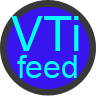
<style>
.page{position:relative;width:96px;height:96px;background:#3815ee}
.page>*{position:absolute;margin:0}
.t1{font:48px "ArialMT";color:#00ffff}
.t2{font:32px "ArialMT";color:#00ffff}
</style>
<div class="page">
<p class="t1" style="left:11px;top:16px;width:68px;height:35px">VTi</p>
<p class="t2" style="left:17px;top:55px;width:60px;height:23px">feed</p>
</div>
